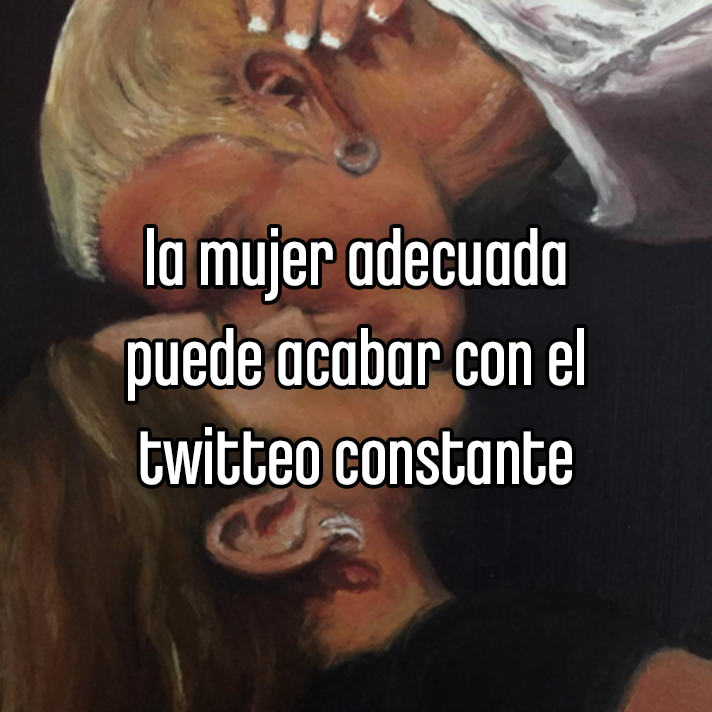
<style>
.page{position:relative;width:712px;height:712px}
.page>*{position:absolute;margin:0}
.t1{font:82.5px "ChaletComprime-CologneEighty";color:#ffffff}
</style>
<div class="page">
<p class="t1" style="left:128px;top:228px;width:456px;height:257px;text-align:center">la mujer adecuada<br>puede acabar con el<br>twitteo constante</p>
</div>
